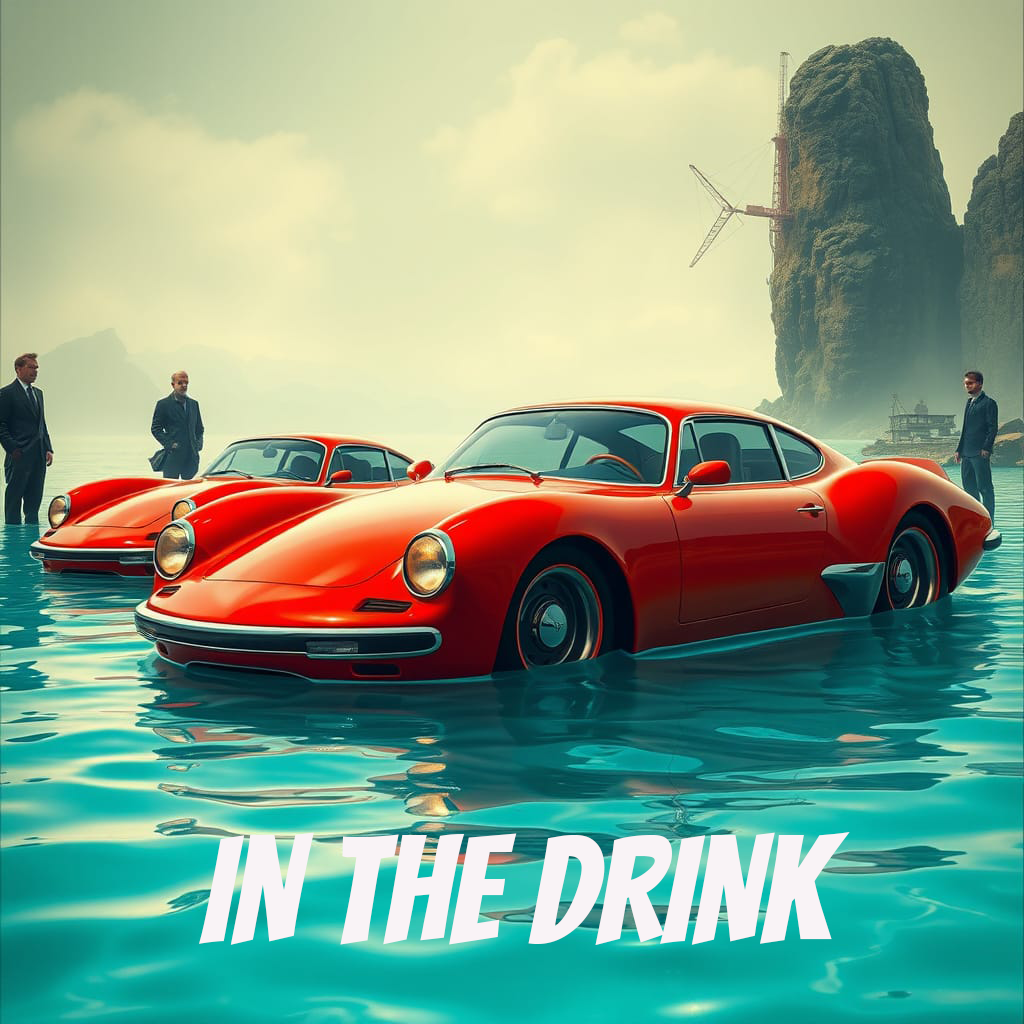
<style>
.page{position:relative;width:1024px;height:1024px}
.page>*{position:absolute;margin:0}
.t1{font:150px "Bangers-Regular";color:#f9f3f6;text-transform:uppercase}
</style>
<div class="page">
<p class="t1" style="left:199px;top:832px;width:651px;height:113px">In the DRink</p>
</div>
